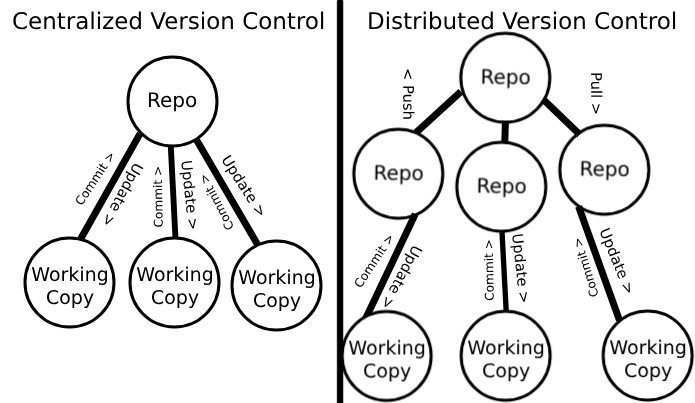
<style>
.page{position:relative;width:695px;height:403px;background:#ffffff}
.page>*{position:absolute;margin:0}
.t1{font:23px "DejaVuSans";color:#000000}
.t2{font:14.7px "DejaVuSans";color:#000000}
.t3{font:12.1px "DejaVuSans";color:#000000}
</style>
<div class="page">
<p class="t1" style="left:13px;top:11px;width:311px;height:19px">Centralized Version Control</p>
<p class="t1" style="left:369px;top:11px;width:307px;height:19px">Distributed Version Control</p>
<p class="t2" style="left:403px;top:69px;width:12px;height:50px;rotate:90deg">&lt; Push</p>
<p class="t2" style="left:591px;top:73px;width:12px;height:41px;rotate:90deg">Pull &gt;</p>
<p class="t3" style="left:76px;top:153px;width:37px;height:52px;rotate:-56deg">Commit &gt;</p>
<p class="t2" style="left:179px;top:161px;width:17px;height:68px;rotate:84deg">Update &gt;</p>
<p class="t2" style="left:222px;top:154px;width:41px;height:61px;rotate:57deg">Update &gt;</p>
<p class="t2" style="left:105px;top:164px;width:39px;height:61px;rotate:118deg">Update &gt;</p>
<p class="t3" style="left:152px;top:167px;width:11px;height:60px;rotate:-91deg">Commit &gt;</p>
<p class="t3" style="left:202px;top:175px;width:31px;height:55px;rotate:-118deg">Commit &gt;</p>
<p class="t2" style="left:600px;top:227px;width:30px;height:66px;rotate:68deg">Update &gt;</p>
<p class="t3" style="left:355px;top:236px;width:37px;height:51px;rotate:-56deg">Commit &gt;</p>
<p class="t2" style="left:384px;top:246px;width:39px;height:61px;rotate:118deg">Update &gt;</p>
<p class="t3" style="left:483px;top:240px;width:11px;height:61px;rotate:-91deg">Commit &gt;</p>
<p class="t2" style="left:510px;top:234px;width:17px;height:68px;rotate:84deg">Update &gt;</p>
<p class="t3" style="left:576px;top:238px;width:22px;height:59px;rotate:-107deg">Commit &gt;</p>
</div>
